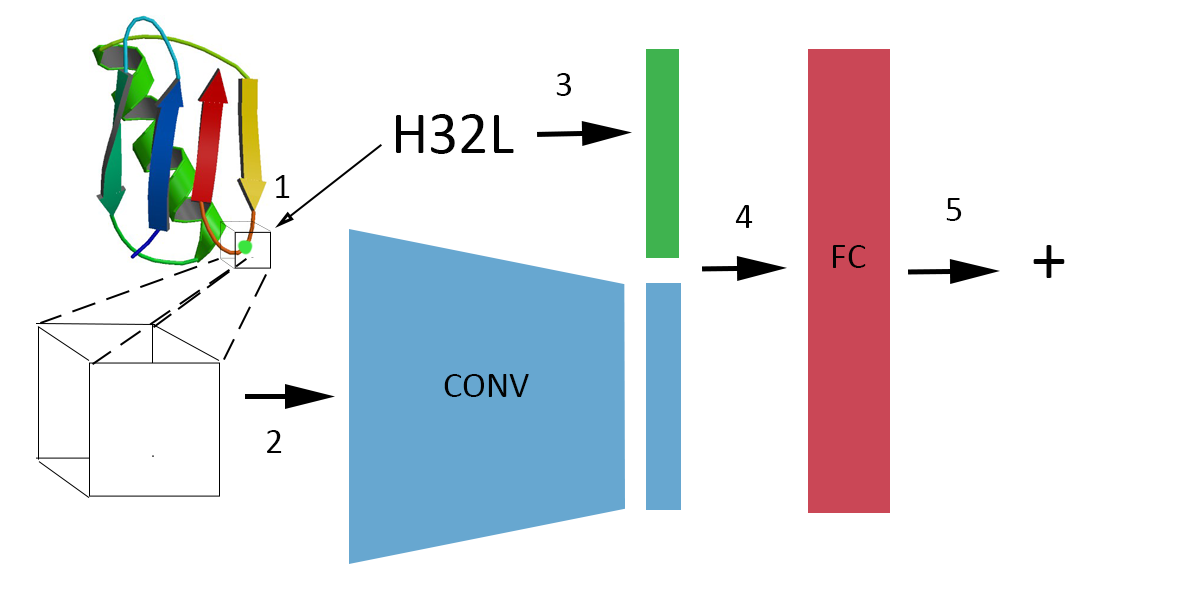
<style>
.page{position:relative;width:1200px;height:599px;background:#ffffff}
.page>*{position:absolute;margin:0}
.t1{font:36px "Calibri";color:#020202}
.t2{font:60px "Calibri";color:#020202}
.t3{font:72px "Calibri";color:#020202}
</style>
<div class="page">
<p class="t1" style="left:556px;top:73px;width:15px;height:23px">3</p>
<p class="t2" style="left:396px;top:114px;width:118px;height:40px">H32L</p>
<p class="t1" style="left:276px;top:175px;width:14px;height:23px">1</p>
<p class="t1" style="left:946px;top:198px;width:16px;height:23px">5</p>
<p class="t1" style="left:735px;top:205px;width:18px;height:23px">4</p>
<p class="t1" style="left:833px;top:245px;width:33px;height:23px">FC</p>
<p class="t3" style="left:1033px;top:245px;width:32px;height:33px">+</p>
<p class="t1" style="left:444px;top:374px;width:85px;height:23px">CONV</p>
<p class="t1" style="left:267px;top:430px;width:15px;height:23px">2</p>
</div>
